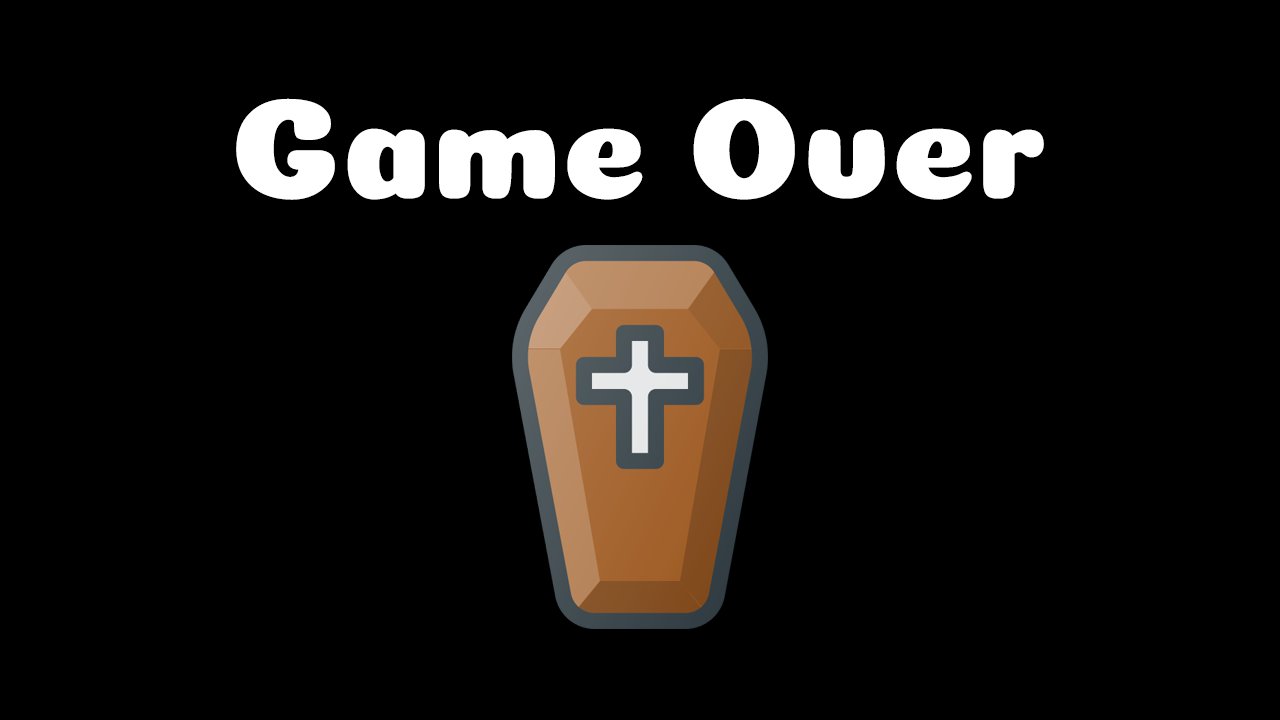
<style>
.page{position:relative;width:1280px;height:720px;background:#000000}
.page>*{position:absolute;margin:0}
.t1{font:144px "Coiny-Regular";color:#ffffff}
</style>
<div class="page">
<p class="t1" style="left:236px;top:98px;width:808px;height:102px">Game Over</p>
</div>
